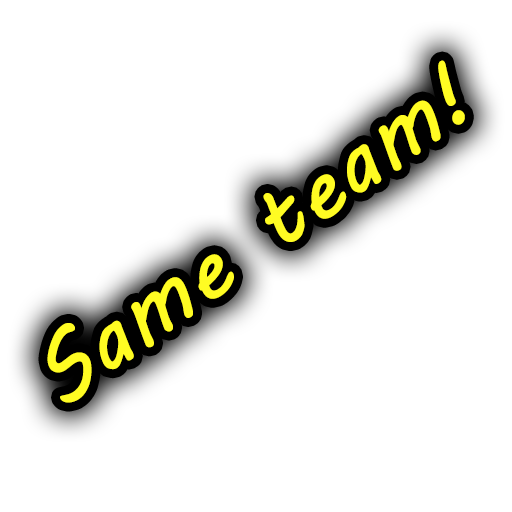
<style>
.page{position:relative;width:512px;height:512px;background:#ffffff}
.page>*{position:absolute;margin:0}
.t1{font:86.6px "MVBoli";color:#fffc23;font-weight:bold}
</style>
<div class="page">
<p class="t1" style="left:47px;top:60px;width:418px;height:343px;rotate:-36deg">Same team!</p>
</div>
